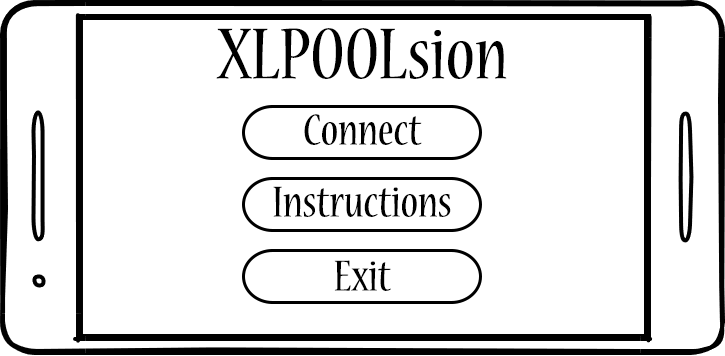
<style>
.page{position:relative;width:725px;height:356px;background:#ffffff}
.page>*{position:absolute;margin:0}
.t1{font:80px "NuevaStd-Cond";color:#000000}
.t2{font:48px "NuevaStd-Cond";color:#000000}
</style>
<div class="page">
<p class="t1" style="left:216px;top:28px;width:291px;height:51px">XLPOOLsion</p>
<p class="t2" style="left:304px;top:114px;width:118px;height:31px">Connect</p>
<p class="t2" style="left:273px;top:186px;width:178px;height:31px">Instructions</p>
<p class="t2" style="left:334px;top:260px;width:57px;height:31px">Exit</p>
</div>
